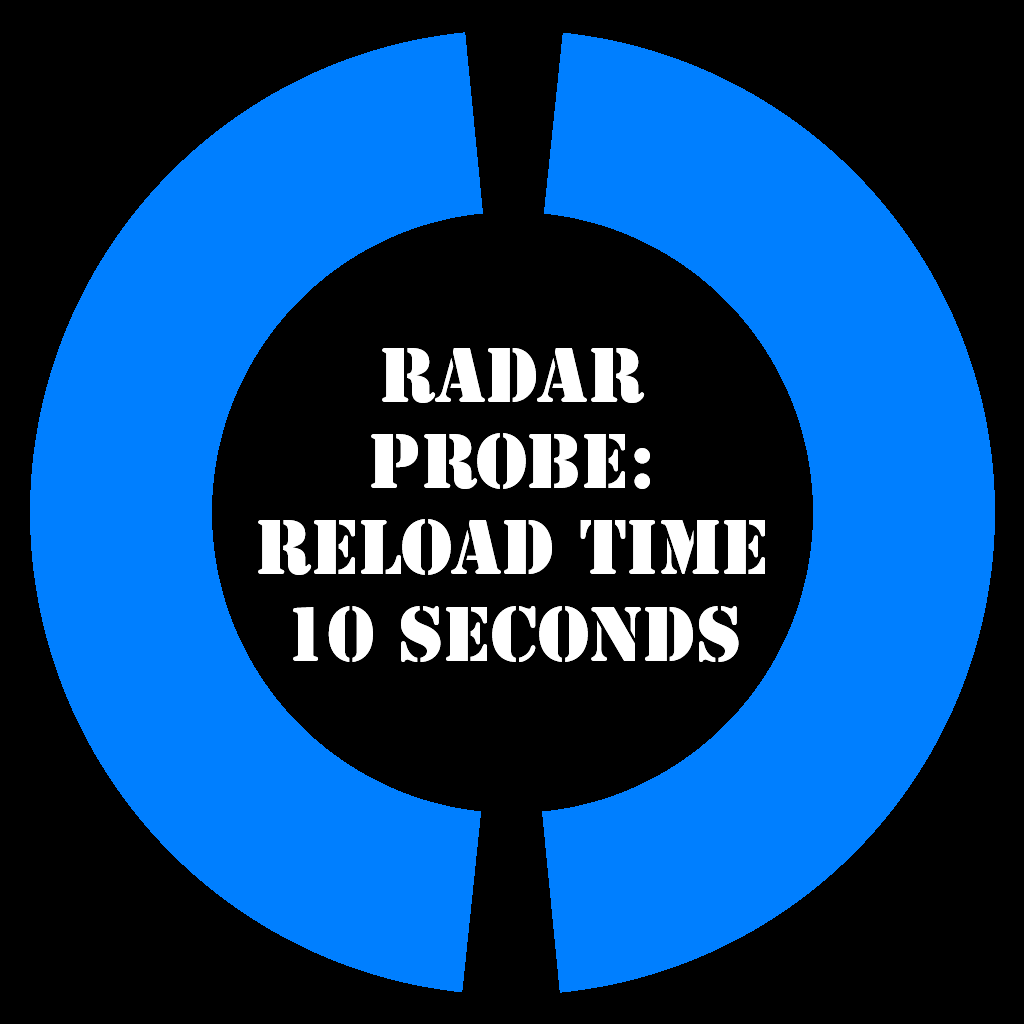
<style>
.page{position:relative;width:1024px;height:1024px;background:#000000}
.page>*{position:absolute;margin:0}
.t1{font:72px "StencilStd";color:#ffffff}
</style>
<div class="page">
<p class="t1" style="left:258px;top:348px;width:507px;height:314px;text-align:center">Radar<br>Probe:<br>Reload time<br>10 Seconds</p>
</div>
